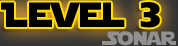
<style>
.page{position:relative;width:178px;height:46px;background:#000000}
.page>*{position:absolute;margin:0}
.t1{font:34.8px "StarJediFixed";color:#000000}
.t2{font:19.2px "StarJediFixed";color:#919191}
</style>
<div class="page">
<p class="t1" style="left:1px;top:2px;width:159px;height:26px">Level 3</p>
<p class="t2" style="left:102px;top:31px;width:74px;height:15px">Sonar</p>
</div>
